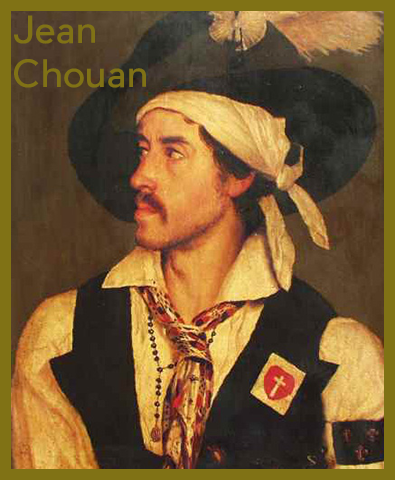
<style>
.page{position:relative;width:395px;height:480px}
.page>*{position:absolute;margin:0}
.t1{font:37px "PierSans";color:#807215}
</style>
<div class="page">
<p class="t1" style="left:14px;top:15px;width:132px;height:73px">Jean<br>Chouan</p>
</div>
